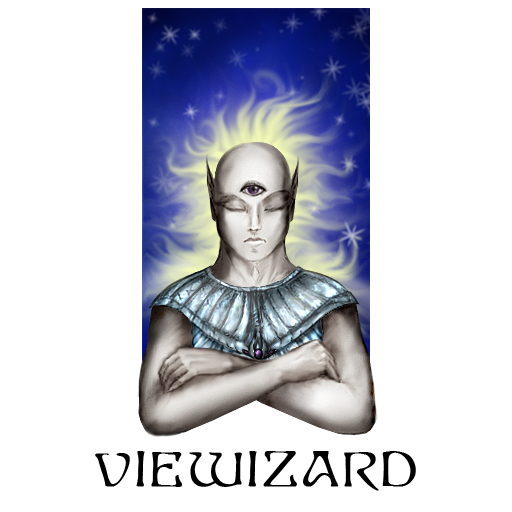
<style>
.page{position:relative;width:512px;height:512px;background:#ffffff}
.page>*{position:absolute;margin:0}
.t1{font:45.4px "EddaCaps";letter-spacing:0.1em;color:#000000;text-transform:uppercase;font-weight:bold}
</style>
<div class="page">
<p class="t1" style="left:95px;top:451px;width:321px;height:40px">viewizard</p>
</div>
